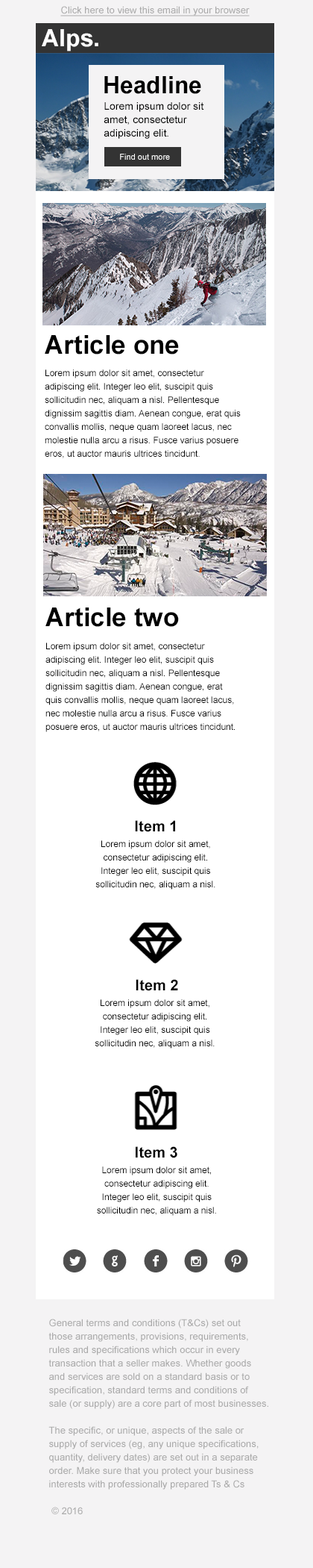
<style>
.page{position:relative;width:313px;height:1568px;background:#ffffff}
.page>*{position:absolute;margin:0}
.t1{font:9.7px "ArialMT";color:#aaaaaa;text-decoration:underline}
.t2{font:23.9px "Arial-BoldMT";color:#ffffff}
.t3{font:23.9px "Arial-BoldMT";color:#000000}
.t4{font:10.4px/13.4px "ArialMT";color:#000000}
.t5{font:8.2px "ArialMT";color:#ffffff}
.t6{font:26.1px "Arial-BoldMT";color:#000000}
.t7{font:9px/13.4px "ArialMT";color:#000000}
.t8{font:26.1px/17.9px "Arial-BoldMT";color:#000000}
.t9{font:14.9px "Arial-BoldMT";color:#000000}
.t10{font:9.7px/13.4px "ArialMT";color:#aaaaaa}
</style>
<div class="page">
<p class="t1" style="left:60px;top:6px;width:190px;height:10px">Click here to view this email in your browser</p>
<p class="t2" style="left:42px;top:29px;width:57px;height:22px">Alps.</p>
<p class="t3" style="left:104px;top:76px;width:98px;height:18px">Headline</p>
<p class="t4" style="left:104px;top:102px;width:100px;height:37px">Lorem ipsum dolor sit <br>amet, consectetur <br>adipiscing elit.</p>
<p class="t5" style="left:120px;top:154px;width:50px;height:6px">Find out more</p>
<p class="t6" style="left:45px;top:335px;width:134px;height:19px">Article one</p>
<p class="t7" style="left:45px;top:369px;width:196px;height:89px"><span class="t8"><br></span>Lorem ipsum dolor sit amet, consectetur adipiscing elit. Integer leo elit, suscipit quis sollicitudin nec, aliquam a nisl. Pellentesque dignissim sagittis diam. Aenean congue, erat quis convallis mollis, neque quam laoreet lacus, nec molestie nulla arcu a risus. Fusce varius posuere eros, ut auctor mauris ultrices tincidunt.</p>
<p class="t6" style="left:46px;top:607px;width:133px;height:20px">Article two</p>
<p class="t7" style="left:46px;top:643px;width:189px;height:89px"><span class="t8"><br></span>Lorem ipsum dolor sit amet, consectetur adipiscing elit. Integer leo elit, suscipit quis sollicitudin nec, aliquam a nisl. Pellentesque dignissim sagittis diam. Aenean congue, erat quis convallis mollis, neque quam laoreet lacus, nec molestie nulla arcu a risus. Fusce varius posuere eros, ut auctor mauris ultrices tincidunt.</p>
<p class="t9" style="left:135px;top:820px;width:40px;height:12px">Item 1</p>
<p class="t7" style="left:96px;top:840px;width:120px;height:50px;text-align:center"><span class="t8"><br></span>Lorem ipsum dolor sit amet, consectetur adipiscing elit. Integer leo elit, suscipit quis sollicitudin nec, aliquam a nisl.</p>
<p class="t9" style="left:136px;top:979px;width:42px;height:12px">Item 2</p>
<p class="t7" style="left:95px;top:999px;width:120px;height:50px;text-align:center"><span class="t8"><br></span>Lorem ipsum dolor sit amet, consectetur adipiscing elit. Integer leo elit, suscipit quis sollicitudin nec, aliquam a nisl.</p>
<p class="t9" style="left:136px;top:1146px;width:42px;height:12px">Item 3</p>
<p class="t7" style="left:97px;top:1166px;width:119px;height:50px;text-align:center"><span class="t8"><br></span>Lorem ipsum dolor sit amet, consectetur adipiscing elit. Integer leo elit, suscipit quis sollicitudin nec, aliquam a nisl.</p>
<p class="t10" style="left:49px;top:1319px;width:220px;height:195px">General terms and conditions (T&amp;Cs) set out <br>those arrangements, provisions, requirements, <br>rules and specifications which occur in every <br>transaction that a seller makes. Whether goods <br>and services are sold on a standard basis or to <br>specification, standard terms and conditions of <br>sale (or supply) are a core part of most businesses.<br><br>The specific, or unique, aspects of the sale or <br>supply of services (eg, any unique specifications, <br>quantity, delivery dates) are set out in a separate <br>order. Make sure that you protect your business <br>interests with professionally prepared Ts &amp; Cs<br><br> © 2016</p>
</div>
